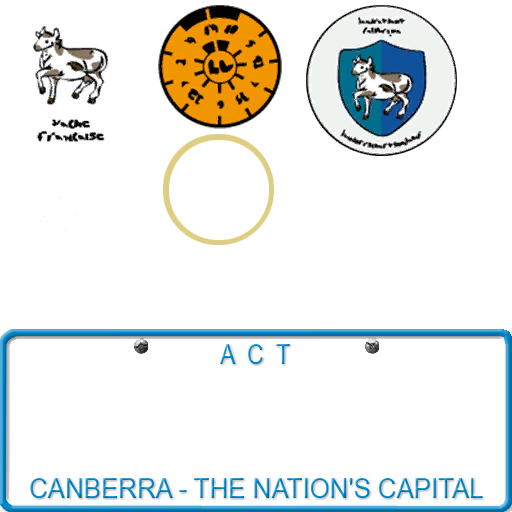
<style>
.page{position:relative;width:512px;height:512px;background:#ffffff}
.page>*{position:absolute;margin:0}
.t1{font:27.3px "ArialMT";scale:0.84 1}
.t2{font:27px "ArialMT";scale:0.96 1}
</style>
<div class="page">
<p class="t1" style="left:220px;top:344px;width:70px;height:20px">A  C  T</p>
<p class="t2" style="left:30px;top:478px;width:453px;height:20px">CANBERRA - THE NATION'S CAPITAL</p>
</div>
